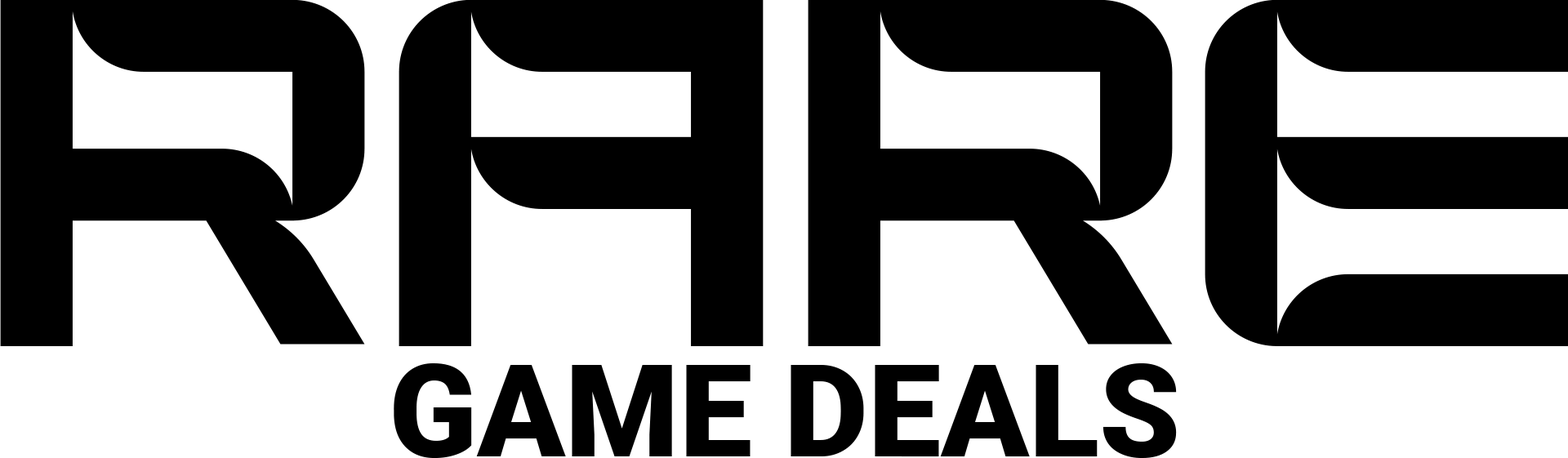
<style>
.page{position:relative;width:1568px;height:458px;background:#ffffff}
.page>*{position:absolute;margin:0}
.t1{font:410.4px "AcostaRegular";color:#000000}
.t2{font:129.1px "Roboto-Black";color:#000000}
</style>
<div class="page">
<p class="t1" style="left:0px;top:0px;width:1570px;height:346px">RARE</p>
<p class="t2" style="left:394px;top:363px;width:783px;height:95px">GAME DEALS</p>
</div>
